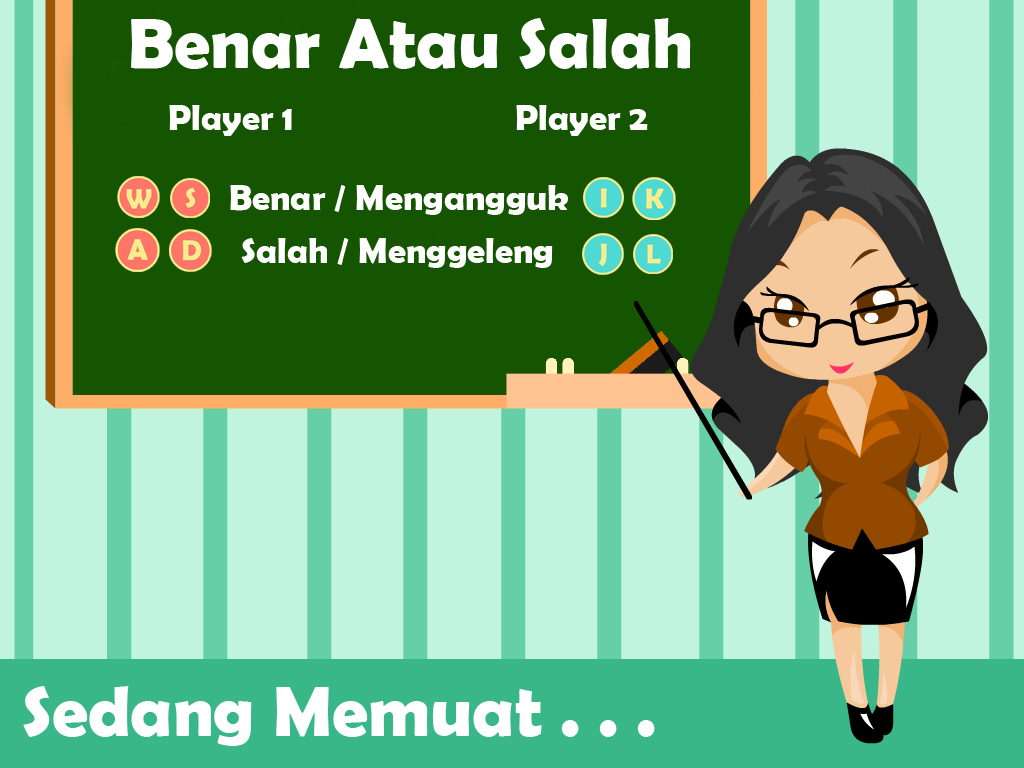
<style>
.page{position:relative;width:1024px;height:768px;background:#c1f4df}
.page>*{position:absolute;margin:0}
.t1{font:72px "BerlinSansFBDemi-Bold";color:#ffffff}
.t2{font:36px "BerlinSansFBDemi-Bold";color:#ffffff}
</style>
<div class="page">
<p class="t1" style="left:131px;top:18px;width:560px;height:51px">Benar Atau Salah</p>
<p class="t2" style="left:169px;top:105px;width:123px;height:31px">Player 1</p>
<p class="t2" style="left:516px;top:105px;width:132px;height:31px">Player 2</p>
<p class="t2" style="left:230px;top:185px;width:338px;height:30px">Benar / Mengangguk</p>
<p class="t2" style="left:241px;top:238px;width:312px;height:30px">Salah / Menggeleng</p>
<p class="t1" style="left:23px;top:686px;width:632px;height:60px">Sedang Memuat . . .</p>
</div>
